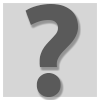
<style>
.page{position:relative;width:100px;height:100px;background:#d6d6d6}
.page>*{position:absolute;margin:0}
.t1{font:128px "Ubuntu-Bold";color:#5a5a5a}
</style>
<div class="page">
<p class="t1" style="left:25px;top:4px;width:54px;height:93px">?</p>
</div>
